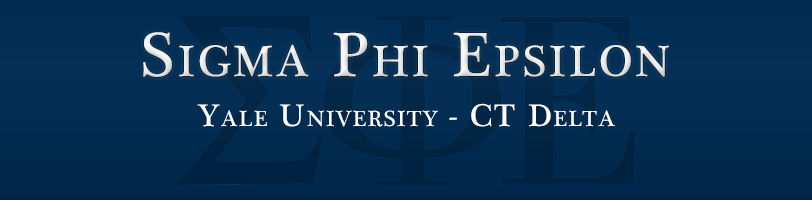
<style>
.page{position:relative;width:812px;height:200px}
.page>*{position:absolute;margin:0}
.t1{font:64px "PlantagenetCherokee";letter-spacing:0.06em;color:#e9e9e9;font-variant:small-caps}
.t2{font:32.1px "PlantagenetCherokee";letter-spacing:0.06em;color:#ffffff;font-variant:small-caps}
</style>
<div class="page">
<p class="t1" style="left:143px;top:32px;width:526px;height:45px">Sigma Phi Epsilon</p>
<p class="t2" style="left:197px;top:103px;width:418px;height:24px">Yale University - CT Delta</p>
</div>
